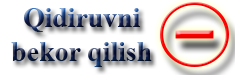
<style>
.page{position:relative;width:235px;height:75px;background:#ffffff}
.page>*{position:absolute;margin:0}
.t1{font:27.8px "TimesNewRomanPS-BoldMT"}
</style>
<div class="page">
<p class="t1" style="left:11px;top:8px;width:141px;height:59px;text-align:center">Qidiruvni<br>bekor qilish</p>
</div>
